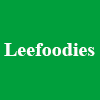
<style>
.page{position:relative;width:100px;height:100px;background:#009f3c}
.page>*{position:absolute;margin:0}
.t1{font:20px "TimesNewRomanPS-BoldMT";color:#fefefe}
</style>
<div class="page">
<p class="t1" style="left:4px;top:43px;width:91px;height:13px">Leefoodies</p>
</div>
